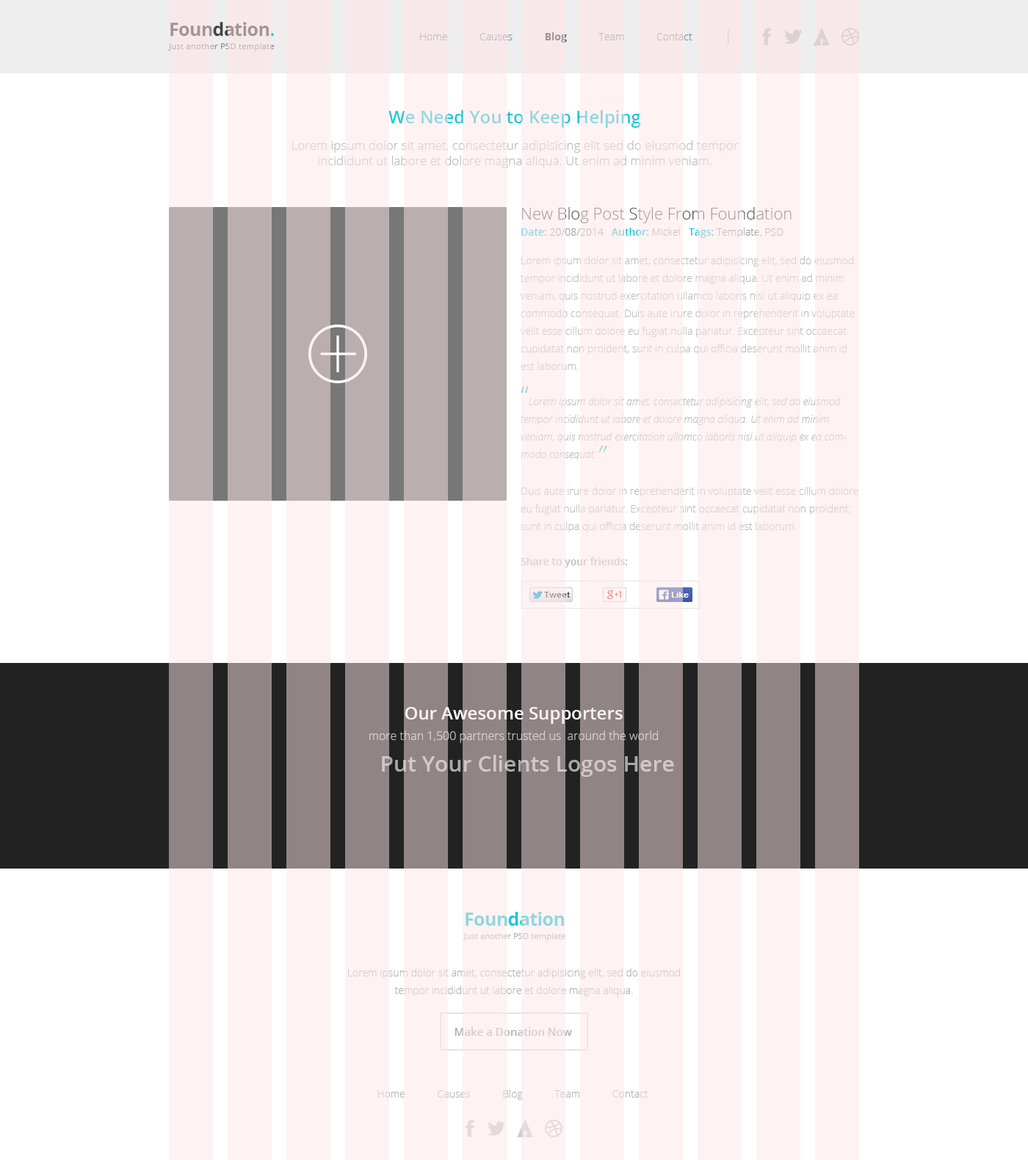
<style>
.page{position:relative;width:1028px;height:1160px;background:#ffffff}
.page>*{position:absolute;margin:0}
.t1{font:8.4px/13.2px "OpenSans";letter-spacing:0.015em;color:#a29595}
.t2{font:18.4px/22px "OpenSans-Bold";letter-spacing:-0.025em;color:#a29595}
.t3{font:10.3px "OpenSans-Light";color:#7e8a98}
.t4{font:10.3px "OpenSans-Bold";color:#444444}
.t5{font:14.7px "OpenSans-Light";color:#b0b0b0}
.t6{font:12.5px/26.4px "OpenSans-Light"}
.t7{font:17.6px "OpenSans-Semibold"}
.t8{font:12.5px/15.4px "OpenSans-Light"}
.t9{font:10.3px/17.6px "OpenSans-Light"}
.t10{font:16.2px "OpenSans-Light"}
.t11{font:10.3px/16.2px "OpenSans-Semibold"}
.t12{font:10.3px/16.2px "OpenSans-Light"}
.t13{font:10.3px/28.6px "OpenSans-Light"}
.t14{font:26.4px/17.6px "OpenSans-Light"}
.t15{font:10.3px/17.6px "OpenSansLight-Italic"}
.t16{font:26.4px/17.6px "OpenSans-Light";font-style:italic}
.t17{font:10.3px/17.6px "OpenSans-Semibold"}
.t18{font:11.7px/21.1px "OpenSans-Light";color:#bbbbbb}
.t19{font:17.6px/21.1px "OpenSans-Semibold";color:#ffffff}
.t20{font:22px "OpenSans-Semibold";color:#d4c7c7}
.t21{font:8.1px/13.2px "OpenSans";letter-spacing:0.015em;color:#90d6df}
.t22{font:18.4px/22px "OpenSans-Bold";letter-spacing:-0.025em;color:#90d6df}
.t23{font:10.3px/17.6px "OpenSans-Light";color:#d8cbcb}
.t24{font:11px "OpenSans-Semibold";color:#d8cbcb}
.t25{font:10.3px "OpenSans-Light"}
</style>
<div class="page">
<p class="t1" style="left:168px;top:22px;width:107px;height:29px"><span class="t2">Foundation</span><span class="t2">.<br></span>Just another PSD template</p>
<p class="t3" style="left:420px;top:29px;width:309px;height:15px">Home            Causes            <span class="t4">Blog            </span>Team            Contact            <span class="t5">|</span></p>
<p class="t6" style="left:292px;top:110px;width:447px;height:58px;text-align:center"><span class="t7">We Need You to Keep Helping<br></span>Lorem ipsum dolor sit amet, consectetur adipisicing elit sed do eiusmod tempor <span class="t8">incididunt ut labore et dolore magna aliqua. Ut enim ad minim veniam.</span></p>
<p class="t9" style="left:521px;top:207px;width:337px;height:361px"><span class="t10">New Blog Post Style From Foundation<br></span><span class="t11">Date: </span><span class="t12">20/08/2014   </span><span class="t11">Author:</span><span class="t12"> Mickel   </span><span class="t11">Tags:</span><span class="t12"> Template, PSD<br></span><span class="t13">Lorem ipsum dolor sit amet, consectetur adipisicing elit, sed do eiusmod </span>tempor incididunt ut labore et dolore magna aliqua. Ut enim ad minim veniam, quis nostrud exercitation ullamco laboris nisi ut aliquip ex ea commodo consequat. Duis aute irure dolor in reprehenderit in voluptate velit esse cillum dolore eu fugiat nulla pariatur. Excepteur sint occaecat cupidatat non proident, sunt in culpa qui officia deserunt mollit anim id est laborum.<br><br><span class="t14">“</span><span class="t15">Lorem ipsum dolor sit amet, consectetur adipisicing elit, sed do eiusmod tempor incididunt ut labore et dolore magna aliqua. Ut enim ad minim veniam, quis nostrud exercitation ullamco laboris nisi ut aliquip ex ea commodo consequat.</span><span class="t16">”<br><br></span>Duis aute irure dolor in reprehenderit in voluptate velit esse cillum dolore eu fugiat nulla pariatur. Excepteur sint occaecat cupidatat non proident, sunt in culpa qui officia deserunt mollit anim id est laborum.<br><br><span class="t17">Share to your friends:</span></p>
<p class="t18" style="left:369px;top:707px;width:289px;height:36px;text-align:center"><span class="t19">Our Awesome Supporters<br></span>more than 1,500 partners trusted us  around the world</p>
<p class="t20" style="left:382px;top:755px;width:292px;height:22px">Put Your Clients Logos Here</p>
<p class="t21" style="left:463px;top:912px;width:102px;height:29px;text-align:center"><span class="t22">Foundation<br></span>Just another PSD template</p>
<p class="t23" style="left:348px;top:968px;width:332px;height:28px;text-align:center">Lorem ipsum dolor sit amet, consectetur adipisicing elit, sed do eiusmod tempor incididunt ut labore et dolore magna aliqua.</p>
<p class="t24" style="left:454px;top:1027px;width:118px;height:9px">Make a Donation Now</p>
<p class="t25" style="left:377px;top:1090px;width:271px;height:10px">Home            Causes            Blog            Team            Contact</p>
</div>
